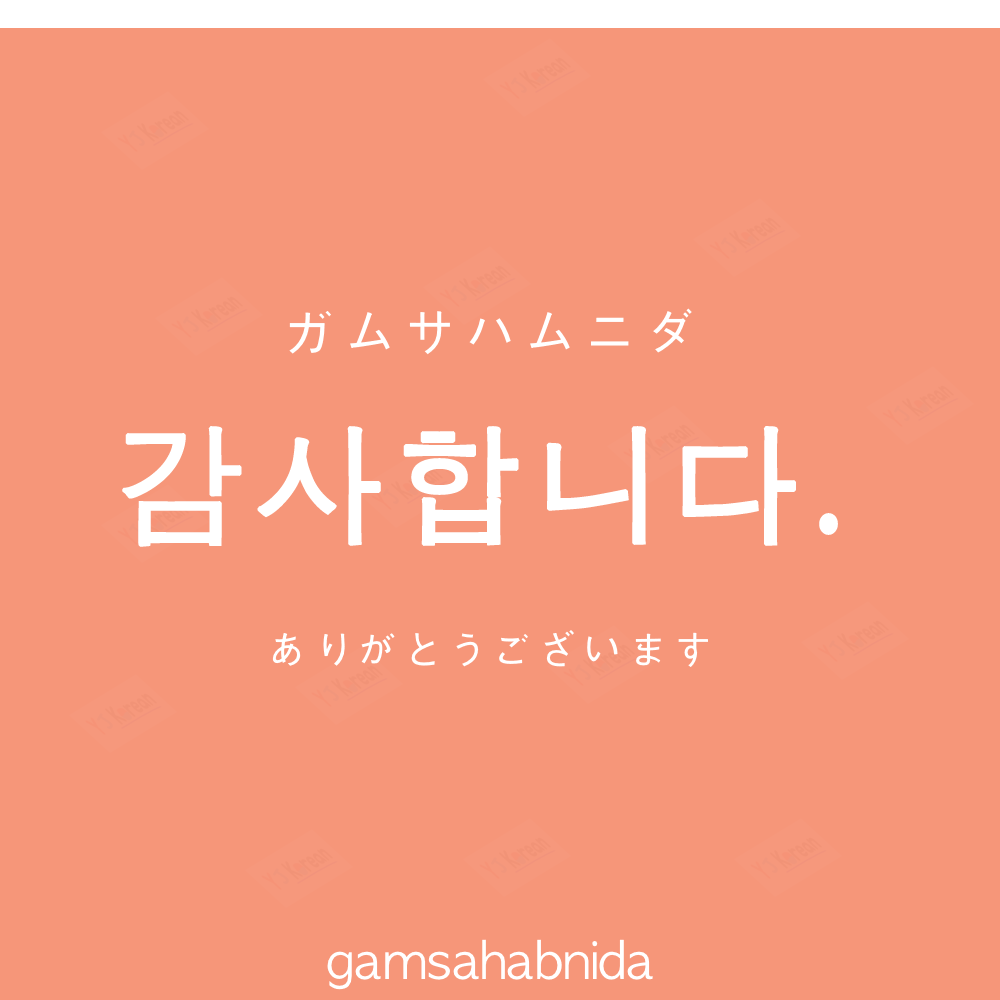
<style>
.page{position:relative;width:1000px;height:1000px;background:#f69679}
.page>*{position:absolute;margin:0}
.t1{font:60px "AppleGothic";color:#ffffff}
.t2{font:130px "AppleGothic";letter-spacing:0.04em;color:#ffffff;font-weight:bold}
.t3{font:45px "AppleGothic";color:#ffffff}
.t4{font:50px "AppleGothic";color:#ffffff}
</style>
<div class="page">
<p class="t1" style="left:289px;top:308px;width:403px;height:47px">ガムサハムニダ</p>
<p class="t2" style="left:122px;top:426px;width:716px;height:121px">감사합니다.</p>
<p class="t3" style="left:272px;top:630px;width:436px;height:37px">ありがとうございます</p>
<p class="t4" style="left:327px;top:939px;width:326px;height:51px">gamsahabnida</p>
</div>
